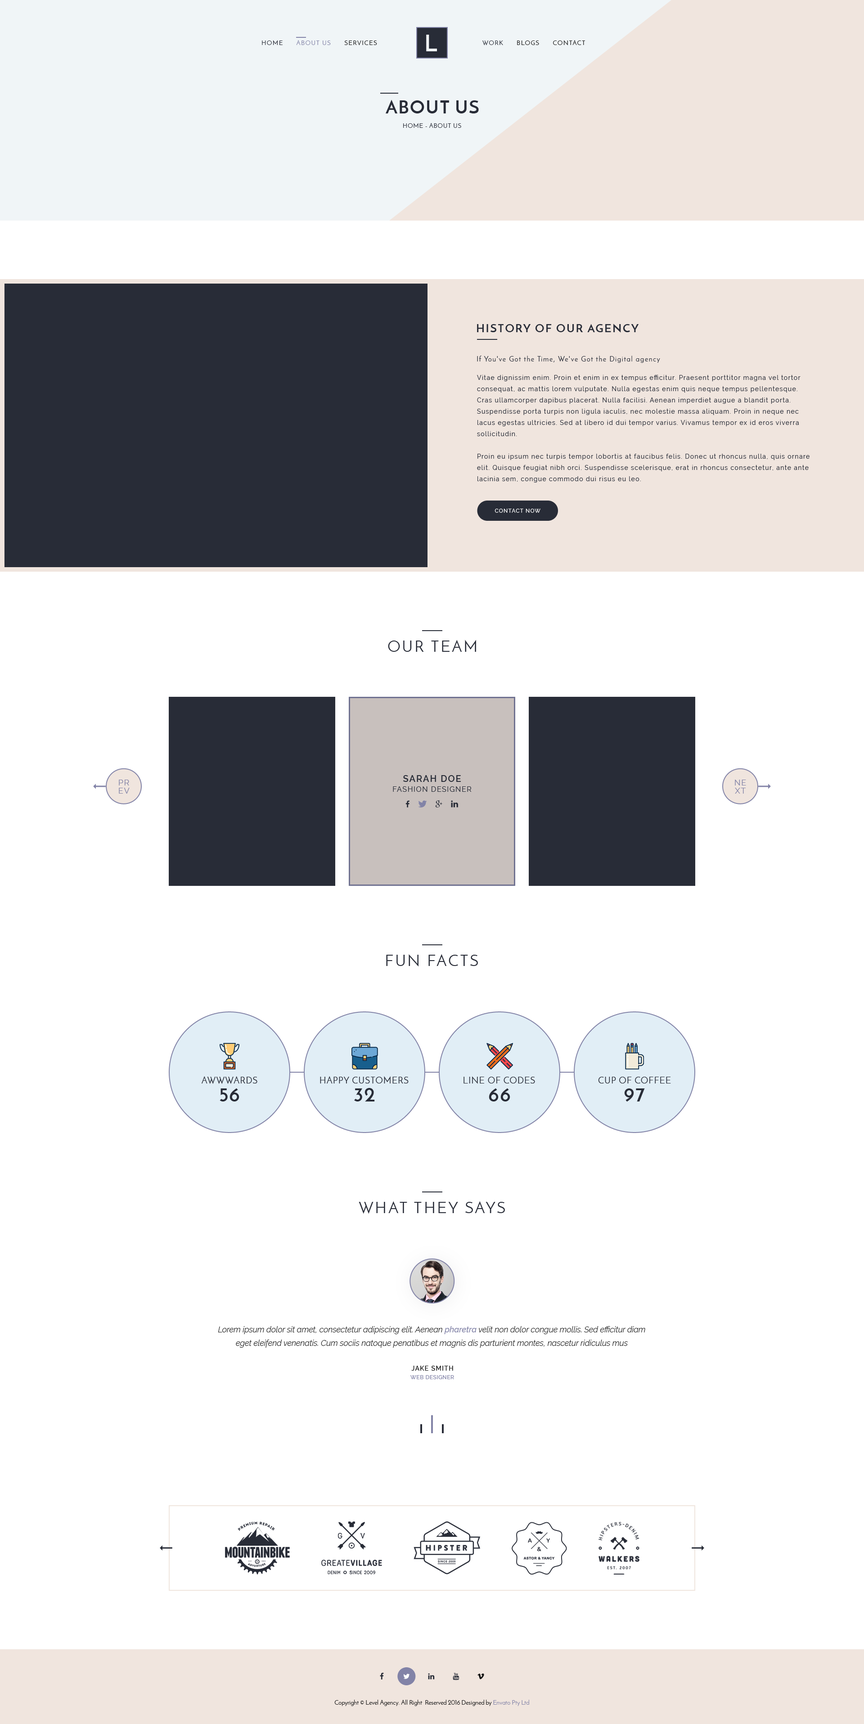
<style>
.page{position:relative;width:864px;height:1724px;background:#ffffff}
.page>*{position:absolute;margin:0}
.t1{font:6.3px "JosefinSans";letter-spacing:0.1em;color:#8283a7;text-transform:uppercase}
.t2{font:6.3px "JosefinSans";letter-spacing:0.1em;color:#282c37;text-transform:uppercase}
.t3{font:6.3px "JosefinSans";letter-spacing:0.1em;color:#141414;text-transform:uppercase}
.t4{font:22.5px "JosefinSans-Bold";letter-spacing:0.4em;color:#f0f5f7;text-transform:uppercase}
.t5{font:18px "JosefinSans-Bold";letter-spacing:0.05em;color:#282c37;text-transform:uppercase}
.t6{font:6.3px "JosefinSans";letter-spacing:0.05em;color:#282c37;text-transform:uppercase}
.t7{font:11.2px "JosefinSans-Bold";letter-spacing:0.1em;color:#282c37;text-transform:uppercase}
.t8{font:7.2px "JosefinSans";letter-spacing:0.1em;color:#282c37}
.t9{font:6.3px/11.2px "Raleway";letter-spacing:0.1em;color:#282c37}
.t10{font:5.4px "Raleway-Medium";letter-spacing:0.1em;color:#ffffff;text-transform:uppercase}
.t11{font:15.8px "JosefinSans";letter-spacing:0.1em;color:#282c37;text-transform:uppercase}
.t12{font:8.1px/8.1px "Raleway";letter-spacing:0.1em;color:#8283a7;text-transform:uppercase}
.t13{font:9px "Raleway-SemiBold";letter-spacing:0.1em;color:#282c37;text-transform:uppercase}
.t14{font:7.2px "Raleway";letter-spacing:0.1em;color:#282c37;text-transform:uppercase}
.t15{font:9px "JosefinSans";letter-spacing:0.05em;color:#282c37;text-transform:uppercase}
.t16{font:20.2px "JosefinSans-Bold";letter-spacing:0.05em;color:#282c37;text-transform:uppercase}
.t17{font:8.1px/13.5px "Raleway-LightItalic";color:#141414}
.t18{font:8.1px/13.5px "Raleway-MediumItalic";color:#8283a7}
.t19{font:6.3px "Raleway-Medium";letter-spacing:0.1em;color:#141414;text-transform:uppercase}
.t20{font:5.4px "Raleway-Medium";letter-spacing:0.05em;color:#8283a7;text-transform:uppercase}
.t21{font:6.3px "JosefinSans";color:#141414}
.t22{font:6.3px "JosefinSans";color:#8283a7}
</style>
<div class="page">
<p class="t1" style="left:262px;top:40px;width:115px;height:5px"><span class="t2">HOME      </span>ABOUT US<span class="t3">      SERVICES</span></p>
<p class="t4" style="left:426px;top:35px;width:11px;height:16px">L</p>
<p class="t3" style="left:482px;top:40px;width:103px;height:5px"><span class="t2">WORK</span>      BLOGS      CONTACT</p>
<p class="t5" style="left:386px;top:99px;width:93px;height:14px">About Us</p>
<p class="t6" style="left:403px;top:123px;width:58px;height:5px">Home - About Us</p>
<p class="t7" style="left:477px;top:324px;width:162px;height:9px">History Of Our Agency</p>
<p class="t8" style="left:477px;top:356px;width:183px;height:7px">If You've Got the Time, We've Got the Digital agency</p>
<p class="t9" style="left:477px;top:375px;width:333px;height:107px">Vitae dignissim enim. Proin et enim in ex tempus efficitur. Praesent porttitor magna vel tortor consequat, ac mattis lorem vulputate. Nulla egestas enim quis neque tempus pellentesque. Cras ullamcorper dapibus placerat. Nulla facilisi. Aenean imperdiet augue a blandit porta. <br>Suspendisse porta turpis non ligula iaculis, nec molestie massa aliquam. Proin in neque nec lacus egestas ultricies. Sed at libero id dui tempor varius. Vivamus tempor ex id eros viverra <br>sollicitudin.<br><br>Proin eu ipsum nec turpis tempor lobortis at faucibus felis. Donec ut rhoncus nulla, quis ornare elit. Quisque feugiat nibh orci. Suspendisse scelerisque, erat in rhoncus consectetur, ante ante lacinia sem, congue commodo dui risus eu leo.</p>
<p class="t10" style="left:495px;top:508px;width:45px;height:5px">Contact Now</p>
<p class="t11" style="left:388px;top:639px;width:88px;height:13px">Our Team</p>
<p class="t12" style="left:119px;top:779px;width:11px;height:14px;text-align:center">Pr<br>ev</p>
<p class="t13" style="left:403px;top:775px;width:58px;height:7px">Sarah Doe</p>
<p class="t12" style="left:735px;top:779px;width:11px;height:14px;text-align:center">Ne<br>Xt</p>
<p class="t14" style="left:393px;top:786px;width:79px;height:6px">Fashion Designer</p>
<p class="t11" style="left:386px;top:954px;width:92px;height:12px">Fun Facts</p>
<p class="t15" style="left:201px;top:1076px;width:56px;height:8px">Awwwards</p>
<p class="t15" style="left:320px;top:1076px;width:89px;height:7px">Happy Customers</p>
<p class="t15" style="left:464px;top:1076px;width:71px;height:8px">Line of Codes</p>
<p class="t15" style="left:598px;top:1076px;width:73px;height:7px">Cup of Coffee</p>
<p class="t16" style="left:220px;top:1088px;width:19px;height:13px">56</p>
<p class="t16" style="left:354px;top:1088px;width:21px;height:13px">32</p>
<p class="t16" style="left:489px;top:1088px;width:21px;height:13px">66</p>
<p class="t16" style="left:624px;top:1088px;width:21px;height:14px">97</p>
<p class="t11" style="left:359px;top:1201px;width:146px;height:13px">What They Says</p>
<p class="t17" style="left:218px;top:1326px;width:427px;height:21px;text-align:center">Lorem ipsum dolor sit amet, consectetur adipiscing elit. Aenean <span class="t18">pharetra</span> velit non dolor congue mollis. Sed efficitur diam eget eleifend venenatis. Cum sociis natoque penatibus et magnis dis parturient montes, nascetur ridiculus mus</p>
<p class="t19" style="left:411px;top:1365px;width:42px;height:5px">Jake Smith</p>
<p class="t20" style="left:410px;top:1375px;width:44px;height:4px">Web Designer</p>
<p class="t21" style="left:334px;top:1699px;width:195px;height:7px">Copyright © Level Agency. All Right  Reserved 2016 Designed by <span class="t22">Envato Pty Ltd</span></p>
</div>
